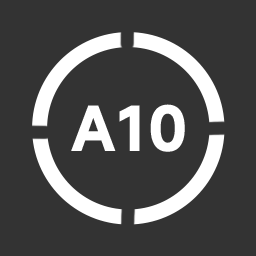
<style>
.page{position:relative;width:256px;height:256px;background:#333333}
.page>*{position:absolute;margin:0}
.t1{font:58.3px "MiSansVF-Bold";letter-spacing:0.025em;color:#ffffff}
</style>
<div class="page">
<p class="t1" style="left:71px;top:104px;width:114px;height:48px">A10</p>
</div>
